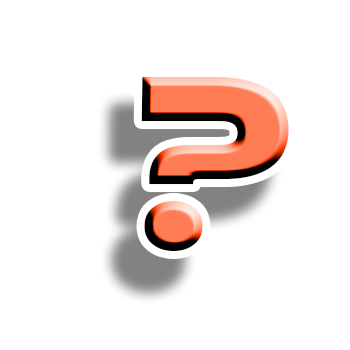
<style>
.page{position:relative;width:350px;height:350px;background:#ffffff}
.page>*{position:absolute;margin:0}
.t1{font:300px "elasisrg"}
</style>
<div class="page">
<p class="t1" style="left:141px;top:77px;width:148px;height:174px">?</p>
</div>
